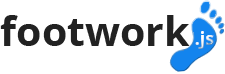
<style>
.page{position:relative;width:225px;height:74px;background:#ffffff}
.page>*{position:absolute;margin:0}
.t1{font:41px "OpenSans-Bold";color:#222222}
.t2{font:18px "OpenSans-Bold"}
</style>
<div class="page">
<p class="t1" style="left:0px;top:15px;width:190px;height:31px">footwork</p>
<p class="t2" style="left:195px;top:31px;width:19px;height:18px">js.</p>
</div>
